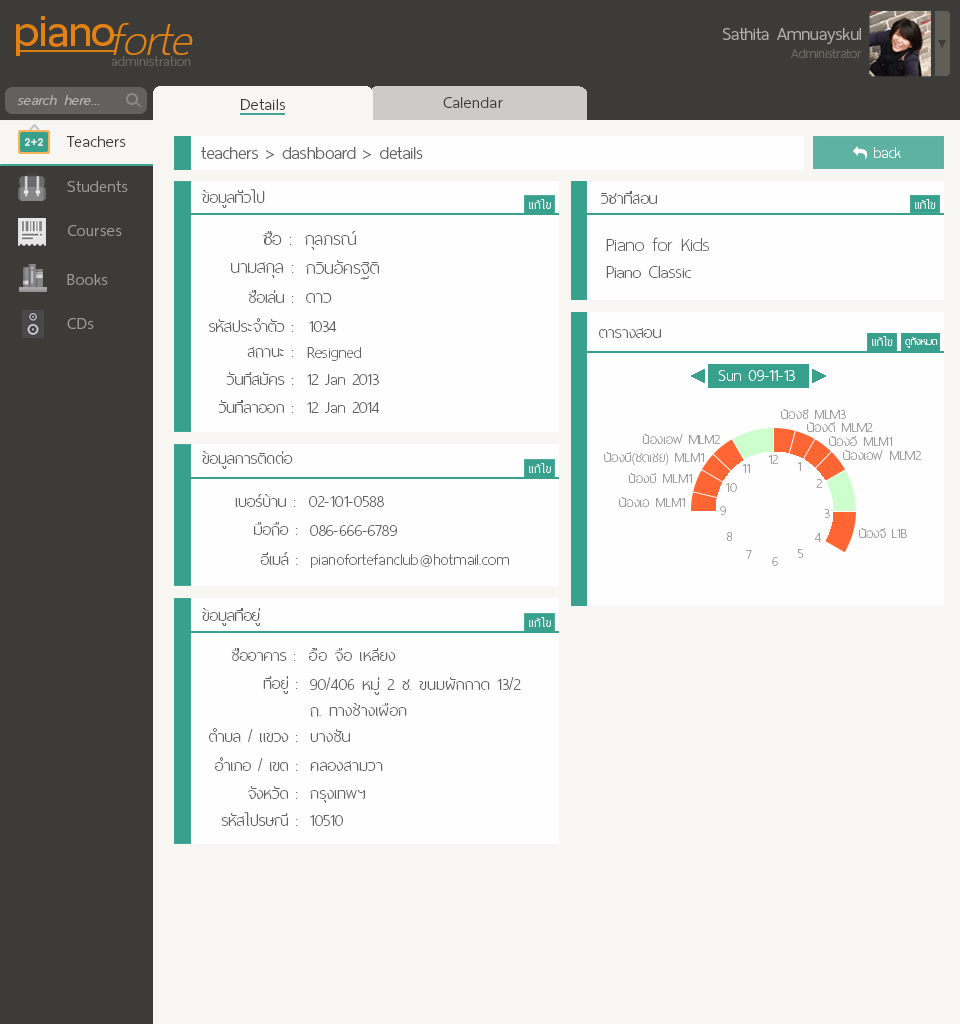
<style>
.page{position:relative;width:960px;height:1024px;background:#fefefe}
.page>*{position:absolute;margin:0}
.t1{font:60px "ThaiSansNeue-SemiBold";letter-spacing:-0.005em;color:#e28212}
.t2{font:62px "ThaiSansNeue-ExtraLightItalic";letter-spacing:-0.005em;color:#e28212}
.t3{font:24px "ThaiSansNeue-Light";letter-spacing:-0.005em;color:#afaeac}
.t4{font:18px "ThaiSansNeue-Light";letter-spacing:-0.005em;color:#6a665f}
.t5{font:18.5px "ThaiSansNeue-ExtraLight";letter-spacing:0.025em;color:#6a665f}
.t6{font:20px "ThaiSansNeue-LightItalic";letter-spacing:0.025em;color:#b4b1ae}
.t7{font:22px "ThaiSansNeue-Light";letter-spacing:0.025em;color:#3d3b37}
.t8{font:24px "ThaiSansNeue-Light";letter-spacing:-0.005em;color:#636363}
.t9{font:22px "ThaiSansNeue-UltraLight";color:#fefefe}
.t10{font:22px "ThaiSansNeue-Light";letter-spacing:0.025em;color:#9b9a99}
.t11{font:22px "ThaiSansNeue-UltraLight";color:#636363}
.t12{font:16px "ThaiSansNeue-UltraLight";letter-spacing:0.025em;color:#fefefe}
.t13{font:16px "ThaiSansNeue-UltraLight";color:#fefefe}
.t14{font:24px "ThaiSansNeue-UltraLight";color:#636363}
.t15{font:26px "ThaiSansNeue-UltraLight";color:#636363}
.t16{font:14px "ThaiSansNeue-UltraLight";color:#fefefe}
.t17{font:18px "ThaiSansNeue-UltraLight";letter-spacing:0.01em;color:#9d9d9d}
.t18{font:22px "ThaiSansNeue-UltraLight";letter-spacing:0.01em;color:#636363}
.t19{font:18px "ThaiSansNeue-UltraLight";color:#9d9d9d}
</style>
<div class="page">
<p class="t1" style="left:16px;top:16px;width:98px;height:40px">piano</p>
<p class="t2" style="left:113px;top:23px;width:80px;height:32px">forte</p>
<p class="t3" style="left:723px;top:28px;width:138px;height:16px">Sathita Amnuayskul</p>
<p class="t4" style="left:791px;top:49px;width:71px;height:9px">Administrator</p>
<p class="t5" style="left:111px;top:56px;width:80px;height:10px">administration</p>
<p class="t6" style="left:17px;top:95px;width:83px;height:10px">search here...</p>
<p class="t7" style="left:241px;top:99px;width:44px;height:11px">Details</p>
<p class="t7" style="left:443px;top:97px;width:60px;height:11px">Calendar</p>
<p class="t7" style="left:66px;top:136px;width:60px;height:11px">Teachers</p>
<p class="t8" style="left:201px;top:147px;width:222px;height:12px">teachers &gt; dashboard &gt; details</p>
<p class="t9" style="left:874px;top:147px;width:27px;height:11px">back</p>
<p class="t10" style="left:67px;top:181px;width:61px;height:11px">Students</p>
<p class="t11" style="left:202px;top:189px;width:63px;height:19px">ข้อมูลทั่วไป</p>
<p class="t11" style="left:601px;top:191px;width:56px;height:13px">วิชาที่สอน</p>
<p class="t12" style="left:529px;top:199px;width:22px;height:10px">แก้ไข</p>
<p class="t13" style="left:915px;top:199px;width:21px;height:10px">แก้ไข</p>
<p class="t10" style="left:68px;top:225px;width:54px;height:11px">Courses</p>
<p class="t14" style="left:263px;top:231px;width:29px;height:14px">ชื่อ :</p>
<p class="t14" style="left:305px;top:231px;width:51px;height:19px">กุลภรณ์</p>
<p class="t15" style="left:606px;top:237px;width:103px;height:14px">Piano for Kids</p>
<p class="t14" style="left:231px;top:262px;width:63px;height:16px">นามสกุล :</p>
<p class="t14" style="left:306px;top:260px;width:73px;height:20px">กวินอัครฐิติ</p>
<p class="t14" style="left:606px;top:266px;width:86px;height:12px">Piano Classic</p>
<p class="t10" style="left:67px;top:274px;width:41px;height:11px">Books</p>
<p class="t11" style="left:248px;top:290px;width:46px;height:13px">ชื่อเล่น :</p>
<p class="t14" style="left:306px;top:293px;width:26px;height:10px">ดาว</p>
<p class="t10" style="left:67px;top:318px;width:27px;height:11px">CDs</p>
<p class="t11" style="left:209px;top:318px;width:85px;height:14px">รหัสประจำตัว :</p>
<p class="t11" style="left:309px;top:321px;width:28px;height:11px">1034</p>
<p class="t11" style="left:599px;top:328px;width:62px;height:10px">ตารางสอน</p>
<p class="t13" style="left:872px;top:336px;width:21px;height:10px">แก้ไข</p>
<p class="t16" style="left:905px;top:337px;width:33px;height:11px">ดูทั้งหมด</p>
<p class="t11" style="left:247px;top:347px;width:47px;height:11px">สถานะ :</p>
<p class="t11" style="left:307px;top:347px;width:54px;height:14px">Resigned</p>
<p class="t11" style="left:226px;top:372px;width:68px;height:13px">วันที่สมัคร :</p>
<p class="t11" style="left:307px;top:374px;width:72px;height:11px">12 Jan 2013</p>
<p class="t9" style="left:718px;top:370px;width:77px;height:11px">Sun 09-11-13</p>
<p class="t11" style="left:218px;top:400px;width:76px;height:13px">วันที่ลาออก :</p>
<p class="t11" style="left:307px;top:402px;width:73px;height:11px">12 Jan 2014</p>
<p class="t17" style="left:781px;top:409px;width:65px;height:10px">น้องซี MLM3</p>
<p class="t17" style="left:807px;top:422px;width:66px;height:10px">น้องดี MLM2</p>
<p class="t17" style="left:642px;top:434px;width:79px;height:10px">น้องเอฟ MLM2</p>
<p class="t17" style="left:829px;top:436px;width:64px;height:10px">น้องอี MLM1</p>
<p class="t11" style="left:202px;top:451px;width:91px;height:18px">ข้อมูลการติดต่อ</p>
<p class="t17" style="left:604px;top:452px;width:100px;height:13px">น้องบี(ชดเชย) MLM1</p>
<p class="t17" style="left:768px;top:455px;width:11px;height:9px">12</p>
<p class="t17" style="left:797px;top:462px;width:4px;height:9px">1</p>
<p class="t17" style="left:843px;top:450px;width:79px;height:10px">น้องเอฟ MLM2</p>
<p class="t12" style="left:529px;top:463px;width:22px;height:10px">แก้ไข</p>
<p class="t17" style="left:628px;top:473px;width:64px;height:10px">น้องบี MLM1</p>
<p class="t17" style="left:742px;top:464px;width:8px;height:9px">11</p>
<p class="t17" style="left:726px;top:483px;width:11px;height:9px">10</p>
<p class="t17" style="left:816px;top:479px;width:7px;height:9px">2</p>
<p class="t11" style="left:235px;top:494px;width:61px;height:13px">เบอร์บ้าน :</p>
<p class="t18" style="left:309px;top:496px;width:75px;height:11px">02-101-0588</p>
<p class="t17" style="left:619px;top:497px;width:66px;height:10px">น้องเอ MLM1</p>
<p class="t19" style="left:720px;top:506px;width:6px;height:9px">9</p>
<p class="t17" style="left:824px;top:509px;width:6px;height:9px">3</p>
<p class="t11" style="left:254px;top:522px;width:44px;height:14px">มือถือ :</p>
<p class="t18" style="left:310px;top:525px;width:87px;height:11px">086-666-6789</p>
<p class="t17" style="left:726px;top:532px;width:7px;height:9px">8</p>
<p class="t17" style="left:814px;top:533px;width:7px;height:9px">4</p>
<p class="t19" style="left:859px;top:528px;width:48px;height:10px">น้องจี L1B</p>
<p class="t11" style="left:260px;top:552px;width:38px;height:13px">อีเมล์ :</p>
<p class="t18" style="left:311px;top:554px;width:198px;height:14px">pianofortefanclub@hotmail.com</p>
<p class="t17" style="left:746px;top:550px;width:6px;height:9px">7</p>
<p class="t17" style="left:772px;top:557px;width:6px;height:9px">6</p>
<p class="t17" style="left:798px;top:549px;width:6px;height:9px">5</p>
<p class="t11" style="left:202px;top:608px;width:58px;height:18px">ข้อมูลที่อยู่</p>
<p class="t12" style="left:529px;top:617px;width:22px;height:10px">แก้ไข</p>
<p class="t11" style="left:231px;top:648px;width:65px;height:13px">ชื่ออาคาร :</p>
<p class="t18" style="left:309px;top:648px;width:87px;height:13px">อื้อ จือ เหลียง</p>
<p class="t11" style="left:263px;top:676px;width:35px;height:18px">ที่อยู่ :</p>
<p class="t18" style="left:310px;top:677px;width:211px;height:18px">90/406 หมู่ 2 ซ. ขนมผักกาด 13/2</p>
<p class="t18" style="left:310px;top:703px;width:97px;height:14px">ถ. ทางช้างเผือก</p>
<p class="t11" style="left:209px;top:728px;width:89px;height:14px">ตำบล / แขวง :</p>
<p class="t18" style="left:310px;top:729px;width:40px;height:13px">บางชัน</p>
<p class="t11" style="left:215px;top:757px;width:83px;height:14px">อำเภอ / เขต :</p>
<p class="t18" style="left:310px;top:761px;width:73px;height:10px">คลองสามวา</p>
<p class="t11" style="left:248px;top:786px;width:50px;height:13px">จังหวัด :</p>
<p class="t18" style="left:310px;top:790px;width:55px;height:13px">กรุงเทพฯ</p>
<p class="t11" style="left:221px;top:812px;width:77px;height:14px">รหัสไปรษณี :</p>
<p class="t18" style="left:310px;top:815px;width:33px;height:11px">10510</p>
</div>
